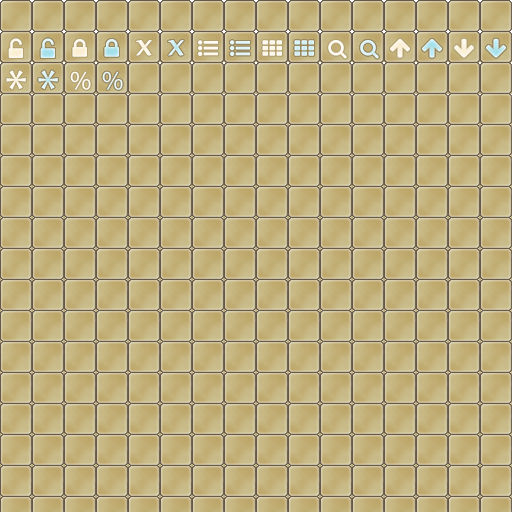
<style>
.page{position:relative;width:512px;height:512px}
.page>*{position:absolute;margin:0}
.t1{font:41.9px "Nyala-Regular";color:#fdf8ed}
.t2{font:41.9px "Nyala-Regular"}
.t3{font:54px "MyriadPro-Regular";color:#fefbf3}
.t4{font:54px "MyriadPro-Regular";color:#dff5fb}
.t5{font:27px "MyriadPro-Regular";color:#fefcf6}
.t6{font:27px "MyriadPro-Regular";color:#e8f8fc}
</style>
<div class="page">
<p class="t1" style="left:136px;top:40px;width:16px;height:16px">x</p>
<p class="t2" style="left:168px;top:40px;width:16px;height:16px">x</p>
<p class="t3" style="left:6px;top:70px;width:20px;height:20px">*</p>
<p class="t4" style="left:38px;top:70px;width:20px;height:20px">*</p>
<p class="t5" style="left:70px;top:71px;width:21px;height:19px">%</p>
<p class="t6" style="left:102px;top:71px;width:21px;height:19px">%</p>
</div>
